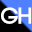
<style>
.page{position:relative;width:32px;height:32px;background:#000000}
.page>*{position:absolute;margin:0}
.t1{font:24px "Code-Bold";color:#ffffff}
</style>
<div class="page">
<p class="t1" style="left:1px;top:7px;width:31px;height:17px">GH</p>
</div>
